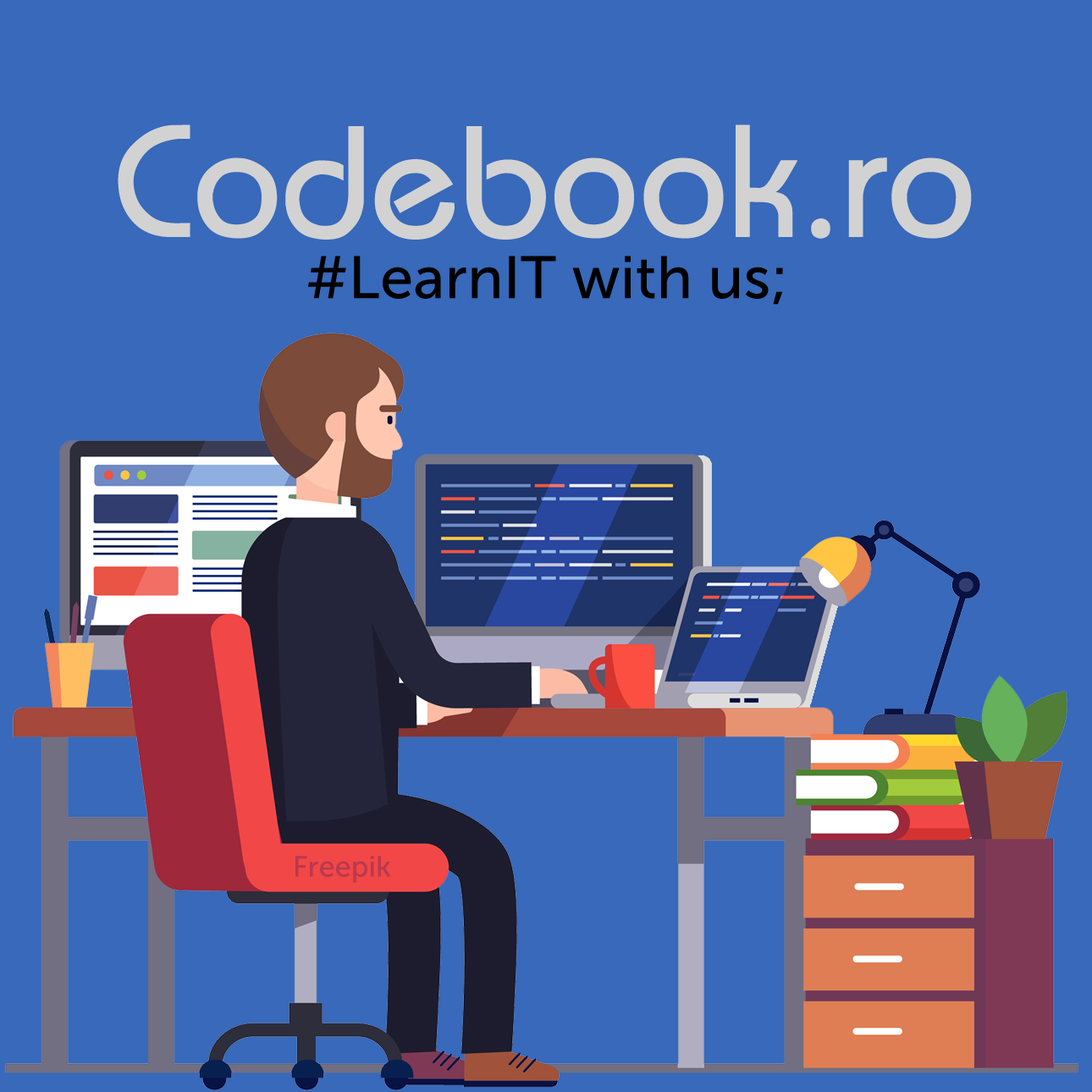
<style>
.page{position:relative;width:1092px;height:1092px;background:#3869ba}
.page>*{position:absolute;margin:0}
.t1{font:159.7px "Bauhaus";color:#d2d2d2}
.t2{font:59.8px "MuseoSans-500";color:#000000}
.t3{font:29.2px "MuseoSans-500";color:#ba384d}
</style>
<div class="page">
<p class="t1" style="left:118px;top:124px;width:854px;height:116px">Codebook.ro</p>
<p class="t2" style="left:308px;top:256px;width:475px;height:49px">#LearnIT with us;</p>
<p class="t3" style="left:295px;top:856px;width:96px;height:27px">Freepik</p>
</div>
